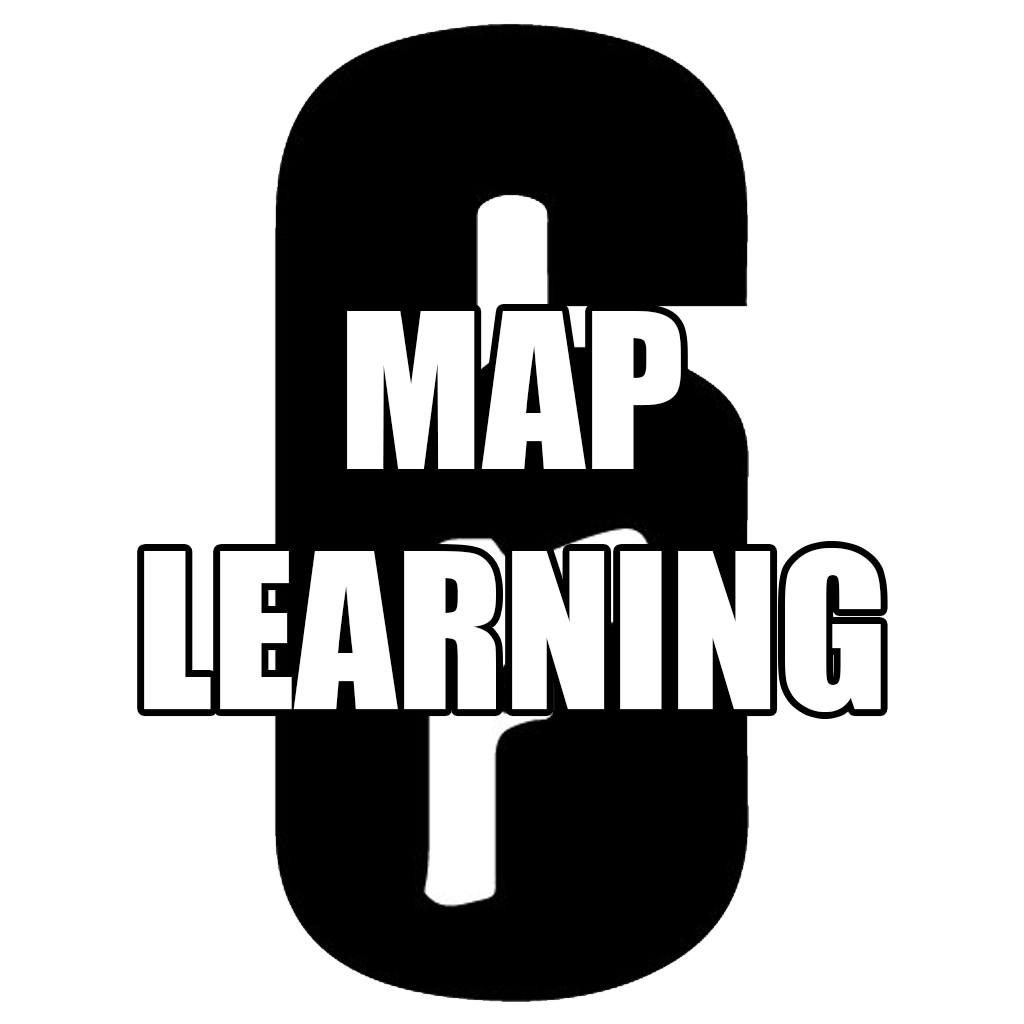
<style>
.page{position:relative;width:1024px;height:1024px;background:#ffffff}
.page>*{position:absolute;margin:0}
.t1{font:200px "Impact";color:#ffffff}
</style>
<div class="page">
<p class="t1" style="left:144px;top:311px;width:737px;height:401px;text-align:center">MAP<br>LEARNING</p>
</div>
